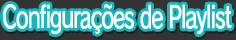
<style>
.page{position:relative;width:236px;height:40px;background:#333333}
.page>*{position:absolute;margin:0}
.t1{font:29.7px "RodinPro-DB";letter-spacing:-0.062em;color:#f9ffff;scale:0.69 1}
</style>
<div class="page">
<p class="t1" style="left:3px;top:4px;width:229px;height:31px">Configurações de Playlist</p>
</div>
